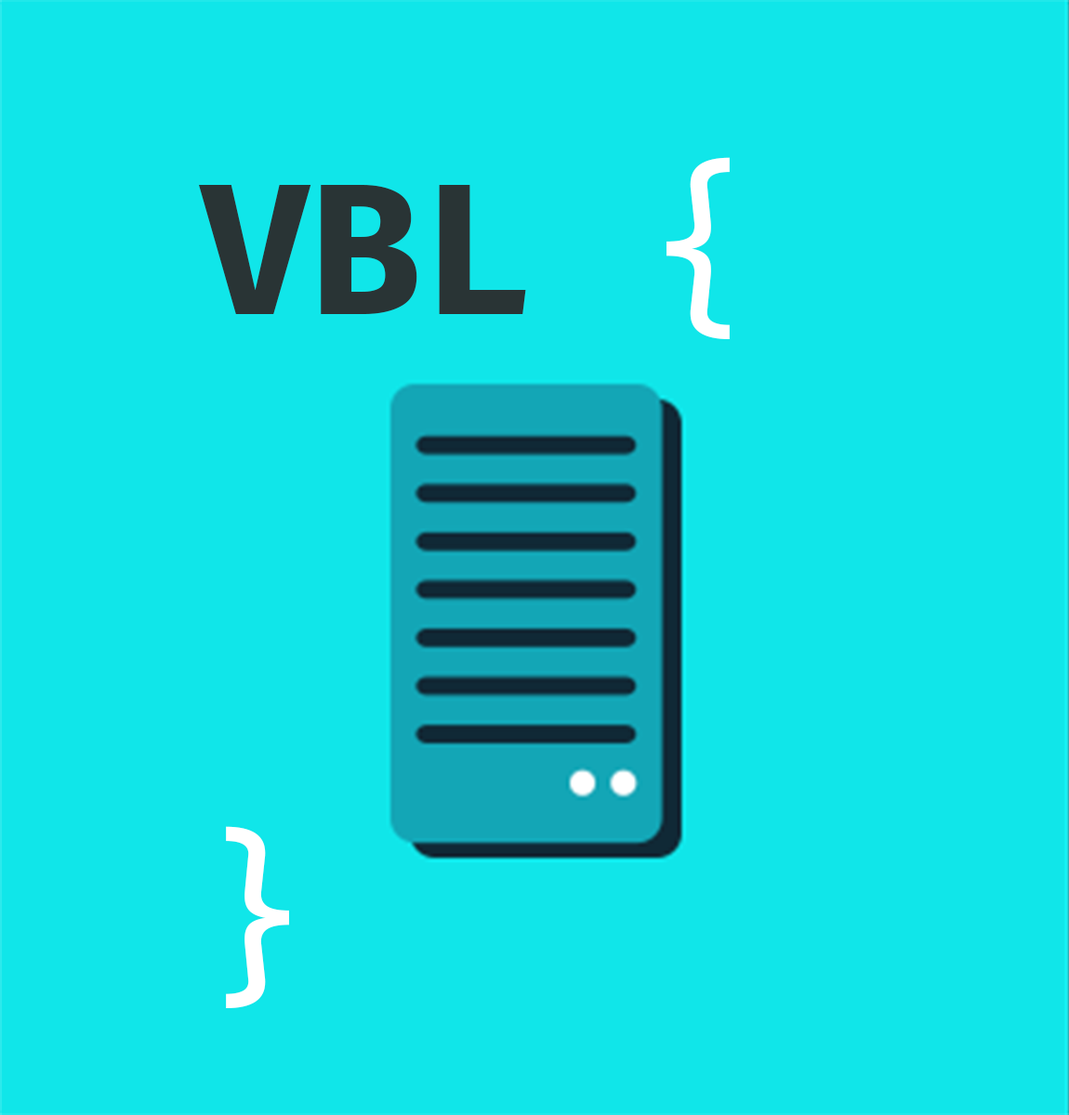
<style>
.page{position:relative;width:1069px;height:1115px;background:#10e6e9}
.page>*{position:absolute;margin:0}
.t1{font:185.9px "FiraCode-Retina";color:#ffffff}
.t2{font:185.9px "FiraCode-Bold";color:#293435}
</style>
<div class="page">
<p class="t1" style="left:199px;top:157px;width:531px;height:852px"><span class="t2">VBL</span> {<br><br><br>}</p>
</div>
